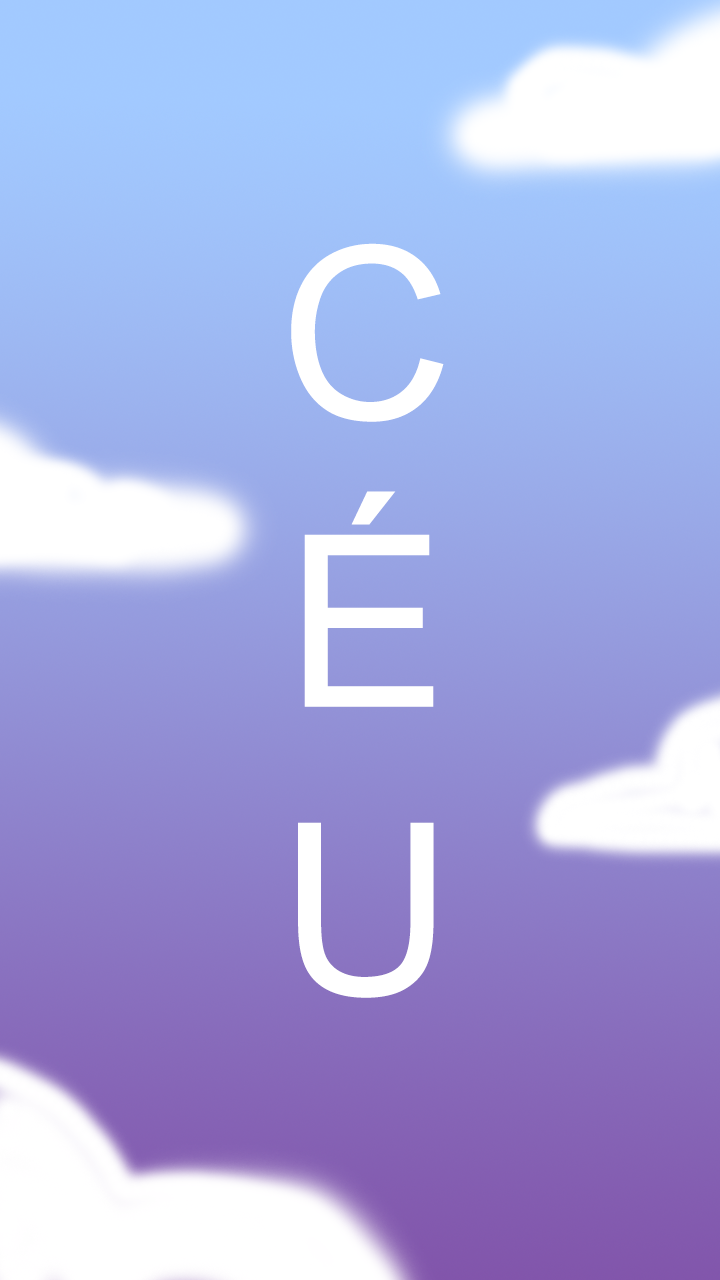
<style>
.page{position:relative;width:720px;height:1280px}
.page>*{position:absolute;margin:0}
.t1{font:240px "ArialMT";color:#ffffff}
</style>
<div class="page">
<p class="t1" style="left:291px;top:243px;width:153px;height:755px;text-align:center">C<br>É<br>U</p>
</div>
